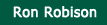
<style>
.page{position:relative;width:107px;height:25px;background:#005941}
.page>*{position:absolute;margin:0}
.t1{font:14px "Tahoma";letter-spacing:0.02em;color:#ffffff;font-weight:bold}
</style>
<div class="page">
<p class="t1" style="left:13px;top:6px;width:84px;height:12px">Ron Robison</p>
</div>
